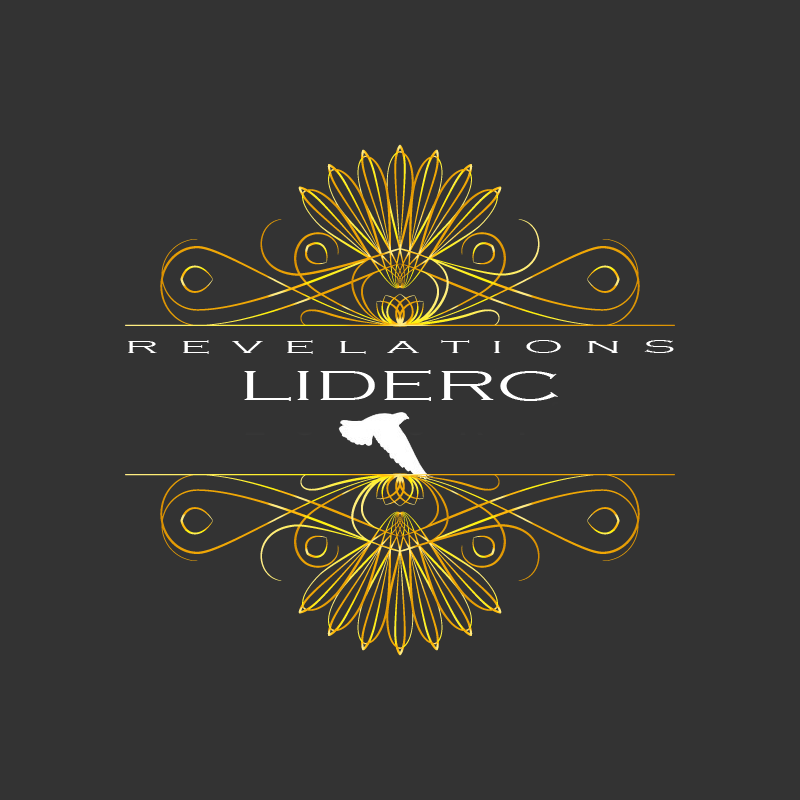
<style>
.page{position:relative;width:800px;height:800px;background:#333333}
.page>*{position:absolute;margin:0}
.t1{font:17.5px "CopperplateGothic-Light";color:#ffffff;scale:2.45 1}
.t2{font:42.8px "CopperplateGothic-Light";color:#ffffff;scale:1.83 1}
</style>
<div class="page">
<p class="t1" style="left:128px;top:340px;width:546px;height:14px">R  E  V  E  L  A  T  I  O  N  S</p>
<p class="t2" style="left:244px;top:370px;width:314px;height:31px">LIDERC</p>
</div>
